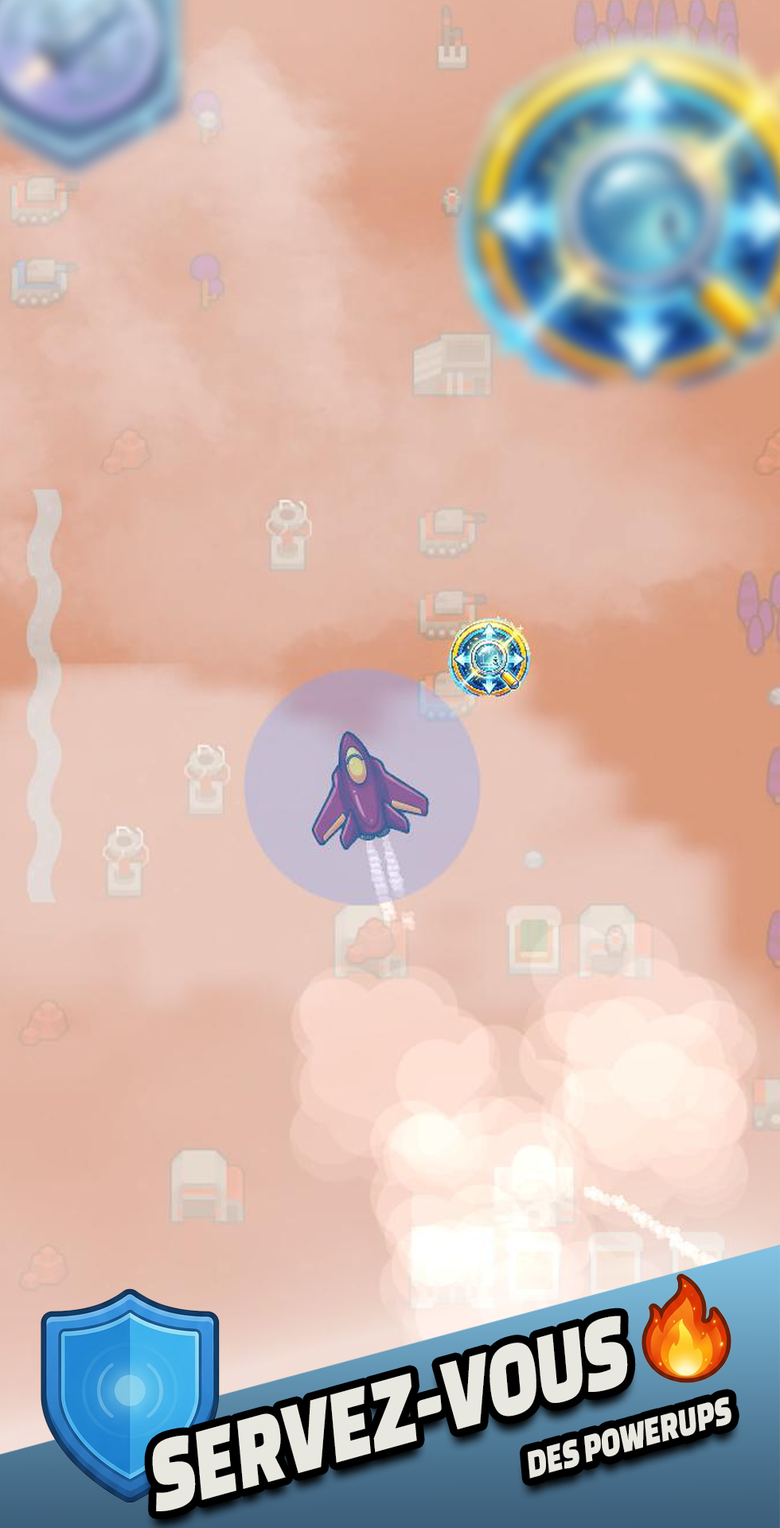
<style>
.page{position:relative;width:780px;height:1528px}
.page>*{position:absolute;margin:0}
.t1{font:108.4px "ChangaOne";color:#e8e8e0;scale:0.74 1}
.t2{font:41.8px "ChangaOne";color:#e8e8e0;scale:0.74 1}
</style>
<div class="page">
<p class="t1" style="left:152px;top:1316px;width:476px;height:196px;rotate:-15deg">SERVEZ-VOUS</p>
<p class="t2" style="left:528px;top:1397px;width:204px;height:82px;rotate:-15deg">DES POWERUPS</p>
</div>
